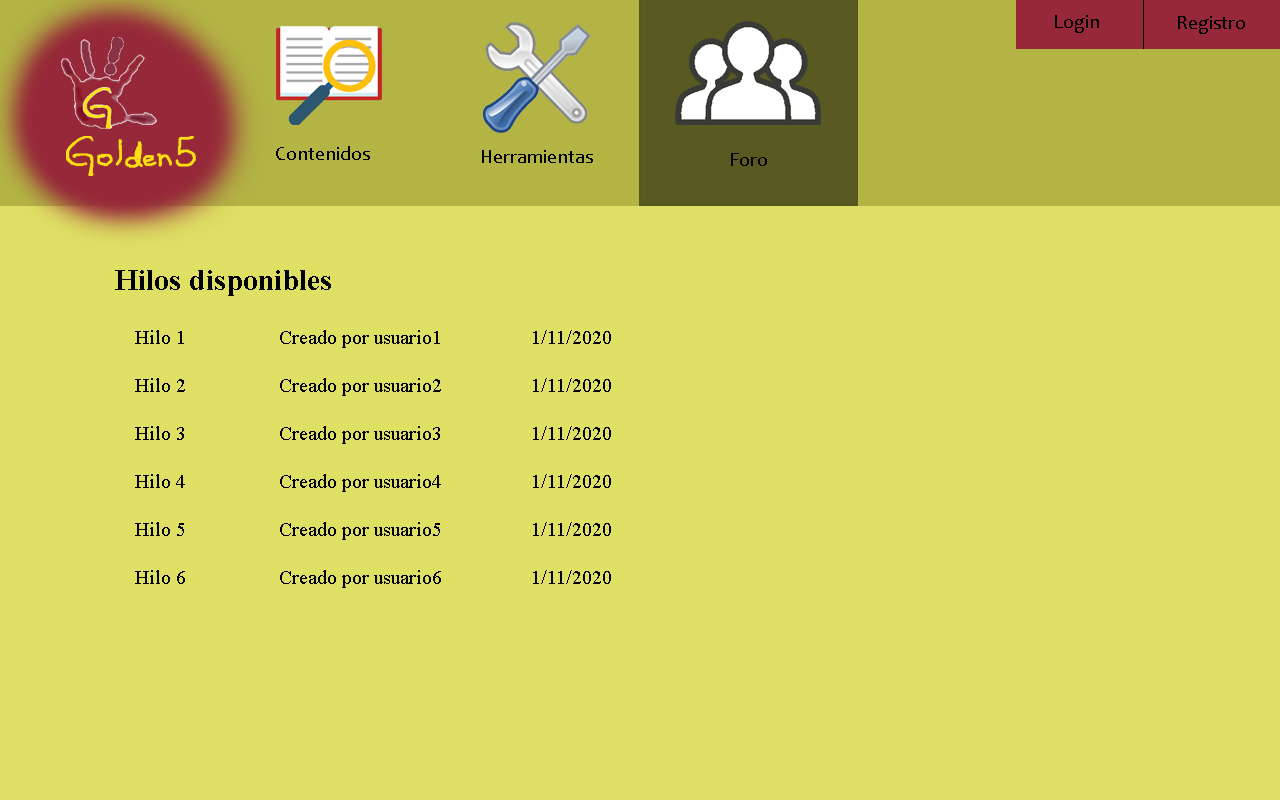
<style>
.page{position:relative;width:1280px;height:800px;background:#dedf63}
.page>*{position:absolute;margin:0}
.t1{font:20px "Candara";color:#000000}
.t2{font:30px "TimesNewRomanPS-BoldMT";color:#000000}
.t3{font:20px "TimesNewRomanPSMT";color:#000000}
</style>
<div class="page">
<p class="t1" style="left:1055px;top:15px;width:44px;height:18px">Login</p>
<p class="t1" style="left:1178px;top:16px;width:67px;height:18px">Registro</p>
<p class="t1" style="left:276px;top:146px;width:94px;height:14px">Contenidos</p>
<p class="t1" style="left:482px;top:150px;width:111px;height:13px">Herramientas</p>
<p class="t1" style="left:731px;top:153px;width:36px;height:13px">Foro</p>
<p class="t2" style="left:115px;top:270px;width:216px;height:26px">Hilos disponibles</p>
<p class="t3" style="left:135px;top:330px;width:476px;height:258px">Hilo 1   Creado por usuario1   1/11/2020<br><br>Hilo 2   Creado por usuario2   1/11/2020<br><br>Hilo 3   Creado por usuario3   1/11/2020<br><br>Hilo 4   Creado por usuario4   1/11/2020<br><br>Hilo 5   Creado por usuario5   1/11/2020<br><br>Hilo 6   Creado por usuario6   1/11/2020</p>
</div>
